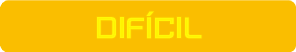
<style>
.page{position:relative;width:296px;height:52px;background:#fabe00}
.page>*{position:absolute;margin:0}
.t1{font:24px "KafuTechnoStd-HV";letter-spacing:0.024em;color:#fff400}
</style>
<div class="page">
<p class="t1" style="left:97px;top:11px;width:105px;height:28px">DIFÍCIL</p>
</div>
